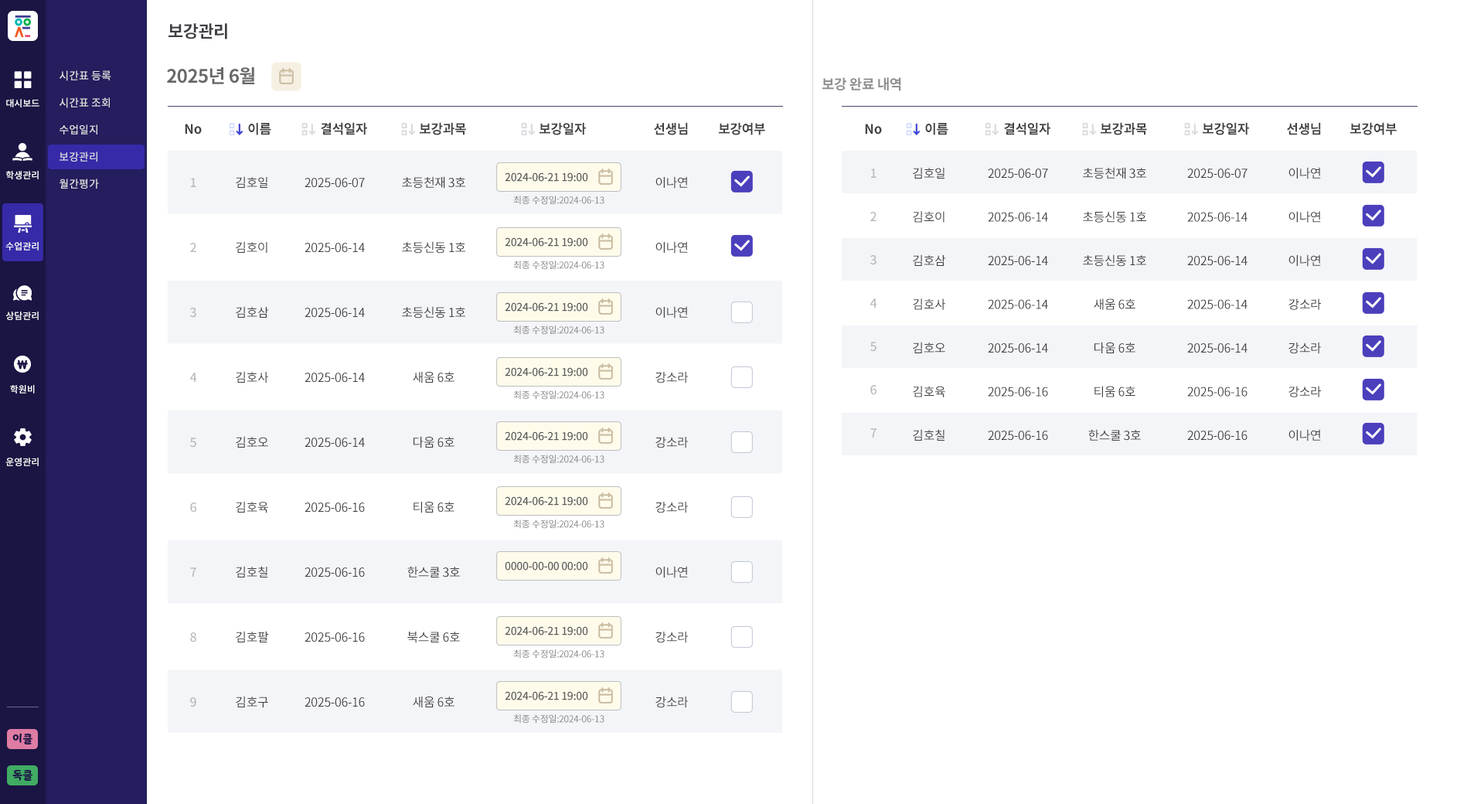
<style>
.page{position:relative;width:1484px;height:804px;background:#ffffff}
.page>*{position:absolute;margin:0}
.t1{font:17px "NotoSansCJKkr-Bold";letter-spacing:-0.025em;color:#3e3e43;text-transform:uppercase}
.t2{font:10.8px/27px "NotoSansCJKkr-Medium";color:#e1e1e1}
.t3{font:18.5px "NotoSansCJKkr-Bold";letter-spacing:-0.025em;color:#686868}
.t4{font:13.9px "NotoSansCJKkr-Bold";letter-spacing:-0.025em;color:#8f8f8f;text-transform:uppercase}
.t5{font:9.3px "NotoSansCJKkr-Medium";color:#ffffff}
.t6{font:13.1px "NotoSansCJKkr-Bold";letter-spacing:-0.025em;color:#404040}
.t7{font:10.8px "NotoSansCJKkr-Medium";letter-spacing:-0.025em;color:#5a5a5a}
.t8{font:12.4px/43.3px "NotoSansCJKkr-Medium";letter-spacing:-0.025em;color:#a8a8a8}
.t9{font:12.4px/43.7px "NotoSansCJKkr-Regular";letter-spacing:-0.025em;color:#404040}
.t10{font:12.4px/64.9px "NotoSansCJKkr-Medium";letter-spacing:-0.025em;color:#a8a8a8}
.t11{font:12.4px/64.9px "NotoSansCJKkr-Regular";letter-spacing:-0.025em;color:#404040}
.t12{font:9.3px "NotoSansCJKkr-Regular";letter-spacing:-0.025em;color:#848484}
.t13{font:10.8px "YoonSoftSlime";color:#1a1543}
</style>
<div class="page">
<p class="t1" style="left:168px;top:23px;width:59px;height:16px">보강관리</p>
<p class="t2" style="left:60px;top:70px;width:51px;height:119px">시간표 등록<br>시간표 조회<br>수업일지<br>보강관리<br>월간평가</p>
<p class="t3" style="left:167px;top:67px;width:88px;height:17px">2025년 6월</p>
<p class="t4" style="left:822px;top:77px;width:79px;height:14px">보강 완료 내역</p>
<p class="t5" style="left:6px;top:99px;width:33px;height:8px">대시보드</p>
<p class="t6" style="left:185px;top:124px;width:17px;height:10px">No</p>
<p class="t6" style="left:248px;top:123px;width:23px;height:12px">이름</p>
<p class="t6" style="left:321px;top:122px;width:46px;height:13px">결석일자</p>
<p class="t6" style="left:420px;top:122px;width:46px;height:13px">보강과목</p>
<p class="t6" style="left:539px;top:122px;width:47px;height:13px">보강일자</p>
<p class="t6" style="left:654px;top:122px;width:34px;height:13px">선생님</p>
<p class="t6" style="left:719px;top:122px;width:46px;height:13px">보강여부</p>
<p class="t6" style="left:865px;top:124px;width:17px;height:10px">No</p>
<p class="t6" style="left:925px;top:123px;width:23px;height:12px">이름</p>
<p class="t6" style="left:1004px;top:122px;width:46px;height:13px">결석일자</p>
<p class="t6" style="left:1100px;top:122px;width:47px;height:13px">보강과목</p>
<p class="t6" style="left:1202px;top:122px;width:47px;height:13px">보강일자</p>
<p class="t6" style="left:1287px;top:122px;width:34px;height:13px">선생님</p>
<p class="t6" style="left:1350px;top:122px;width:46px;height:13px">보강여부</p>
<p class="t5" style="left:6px;top:171px;width:33px;height:8px">학생관리</p>
<p class="t7" style="left:505px;top:172px;width:83px;height:10px">2024-06-21 19:00</p>
<p class="t8" style="left:869px;top:168px;width:8px;height:269px;text-align:center;opacity:0.8">1<br>2<br>3<br>4<br>5<br>6<br>7</p>
<p class="t9" style="left:913px;top:167px;width:33px;height:273px">김호일<br>김호이<br>김호삼<br>김호사<br>김호오<br>김호육<br>김호칠</p>
<p class="t9" style="left:988px;top:168px;width:60px;height:272px;text-align:center">2025-06-07<br>2025-06-14<br>2025-06-14<br>2025-06-14<br>2025-06-14<br>2025-06-16<br>2025-06-16</p>
<p class="t9" style="left:1083px;top:167px;width:63px;height:273px;text-align:center">초등천재 3호<br>초등신동 1호<br>초등신동 1호<br>새움 6호<br>다움 6호<br>티움 6호<br>한스쿨 3호</p>
<p class="t9" style="left:1187px;top:168px;width:60px;height:272px;text-align:center">2025-06-07<br>2025-06-14<br>2025-06-14<br>2025-06-14<br>2025-06-14<br>2025-06-16<br>2025-06-16</p>
<p class="t9" style="left:1288px;top:167px;width:33px;height:274px;text-align:center">이나연<br>이나연<br>이나연<br>강소라<br>강소라<br>강소라<br>이나연</p>
<p class="t10" style="left:189px;top:178px;width:8px;height:529px;text-align:center;opacity:0.8">1<br>2<br>3<br>4<br>5<br>6<br>7<br>8<br>9</p>
<p class="t11" style="left:236px;top:176px;width:33px;height:532px">김호일<br>김호이<br>김호삼<br>김호사<br>김호오<br>김호육<br>김호칠<br>김호팔<br>김호구</p>
<p class="t11" style="left:304px;top:178px;width:61px;height:529px;text-align:center">2025-06-07<br>2025-06-14<br>2025-06-14<br>2025-06-14<br>2025-06-14<br>2025-06-16<br>2025-06-16<br>2025-06-16<br>2025-06-16</p>
<p class="t11" style="left:402px;top:176px;width:63px;height:532px;text-align:center">초등천재 3호<br>초등신동 1호<br>초등신동 1호<br>새움 6호<br>다움 6호<br>티움 6호<br>한스쿨 3호<br>북스쿨 6호<br>새움 6호</p>
<p class="t11" style="left:655px;top:176px;width:33px;height:532px;text-align:center">이나연<br>이나연<br>이나연<br>강소라<br>강소라<br>강소라<br>이나연<br>강소라<br>강소라</p>
<p class="t12" style="left:513px;top:196px;width:91px;height:9px">최종 수정일:2024-06-13</p>
<p class="t5" style="left:5px;top:242px;width:34px;height:8px">수업관리</p>
<p class="t7" style="left:505px;top:237px;width:83px;height:10px">2024-06-21 19:00</p>
<p class="t12" style="left:513px;top:260px;width:91px;height:10px">최종 수정일:2024-06-13</p>
<p class="t7" style="left:505px;top:302px;width:83px;height:9px">2024-06-21 19:00</p>
<p class="t5" style="left:5px;top:311px;width:34px;height:9px">상담관리</p>
<p class="t12" style="left:513px;top:325px;width:91px;height:10px">최종 수정일:2024-06-13</p>
<p class="t7" style="left:505px;top:367px;width:83px;height:9px">2024-06-21 19:00</p>
<p class="t5" style="left:10px;top:385px;width:25px;height:8px">학원비</p>
<p class="t12" style="left:513px;top:390px;width:91px;height:10px">최종 수정일:2024-06-13</p>
<p class="t7" style="left:505px;top:431px;width:83px;height:9px">2024-06-21 19:00</p>
<p class="t5" style="left:5px;top:457px;width:34px;height:9px">운영관리</p>
<p class="t12" style="left:513px;top:454px;width:91px;height:10px">최종 수정일:2024-06-13</p>
<p class="t7" style="left:505px;top:496px;width:83px;height:9px">2024-06-21 19:00</p>
<p class="t12" style="left:513px;top:519px;width:91px;height:10px">최종 수정일:2024-06-13</p>
<p class="t7" style="left:505px;top:561px;width:83px;height:9px">0000-00-00 00:00</p>
<p class="t7" style="left:505px;top:626px;width:83px;height:9px">2024-06-21 19:00</p>
<p class="t12" style="left:513px;top:649px;width:91px;height:9px">최종 수정일:2024-06-13</p>
<p class="t7" style="left:505px;top:691px;width:83px;height:9px">2024-06-21 19:00</p>
<p class="t12" style="left:513px;top:714px;width:91px;height:9px">최종 수정일:2024-06-13</p>
<p class="t13" style="left:12px;top:733px;width:20px;height:11px">이클</p>
<p class="t13" style="left:12px;top:770px;width:20px;height:10px">독클</p>
</div>
